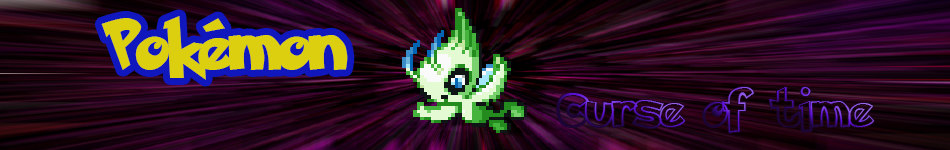
<style>
.page{position:relative;width:950px;height:150px}
.page>*{position:absolute;margin:0}
.t1{font:58.9px "PokemonSolidNormal";color:#dbcf10}
.t2{font:43.6px "PokemonHollowNormal"}
</style>
<div class="page">
<p class="t1" style="left:101px;top:16px;width:247px;height:64px">Pokémon</p>
<p class="t2" style="left:557px;top:87px;width:317px;height:46px">Curse of time</p>
</div>
